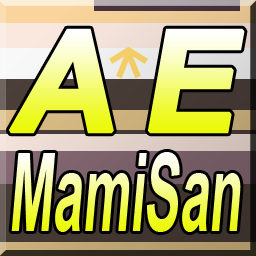
<style>
.page{position:relative;width:256px;height:256px}
.page>*{position:absolute;margin:0}
.t1{font:138.8px "Arial-BoldMT";font-weight:bold;font-style:italic}
.t2{font:109.1px "Arial-BoldMT";font-style:italic;scale:0.49 1}
</style>
<div class="page">
<p class="t1" style="left:9px;top:28px;width:105px;height:106px">A</p>
<p class="t1" style="left:148px;top:28px;width:97px;height:106px">E</p>
<p class="t2" style="left:11px;top:152px;width:230px;height:80px">MamiSan</p>
</div>
